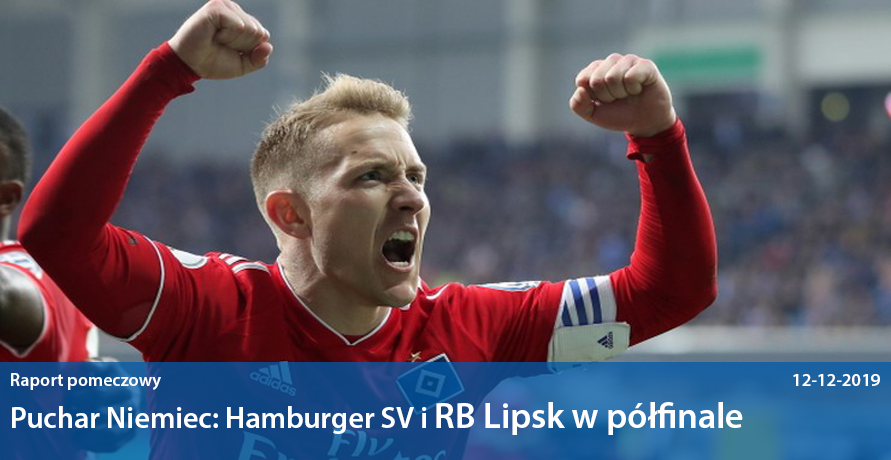
<style>
.page{position:relative;width:891px;height:460px}
.page>*{position:absolute;margin:0}
.t1{font:18px "MyriadPro-Semibold";color:#ffffff}
.t2{font:30px "MyriadPro-Semibold";color:#ffffff}
.t3{font:36px "MyriadPro-Semibold";color:#ffffff}
</style>
<div class="page">
<p class="t1" style="left:11px;top:373px;width:150px;height:17px">Raport pomeczowy</p>
<p class="t1" style="left:793px;top:374px;width:87px;height:12px">12-12-2019</p>
<p class="t2" style="left:12px;top:402px;width:731px;height:33px">Puchar Niemiec: Hamburger SV i <span class="t3">RB Lipsk w półfinale</span></p>
</div>
